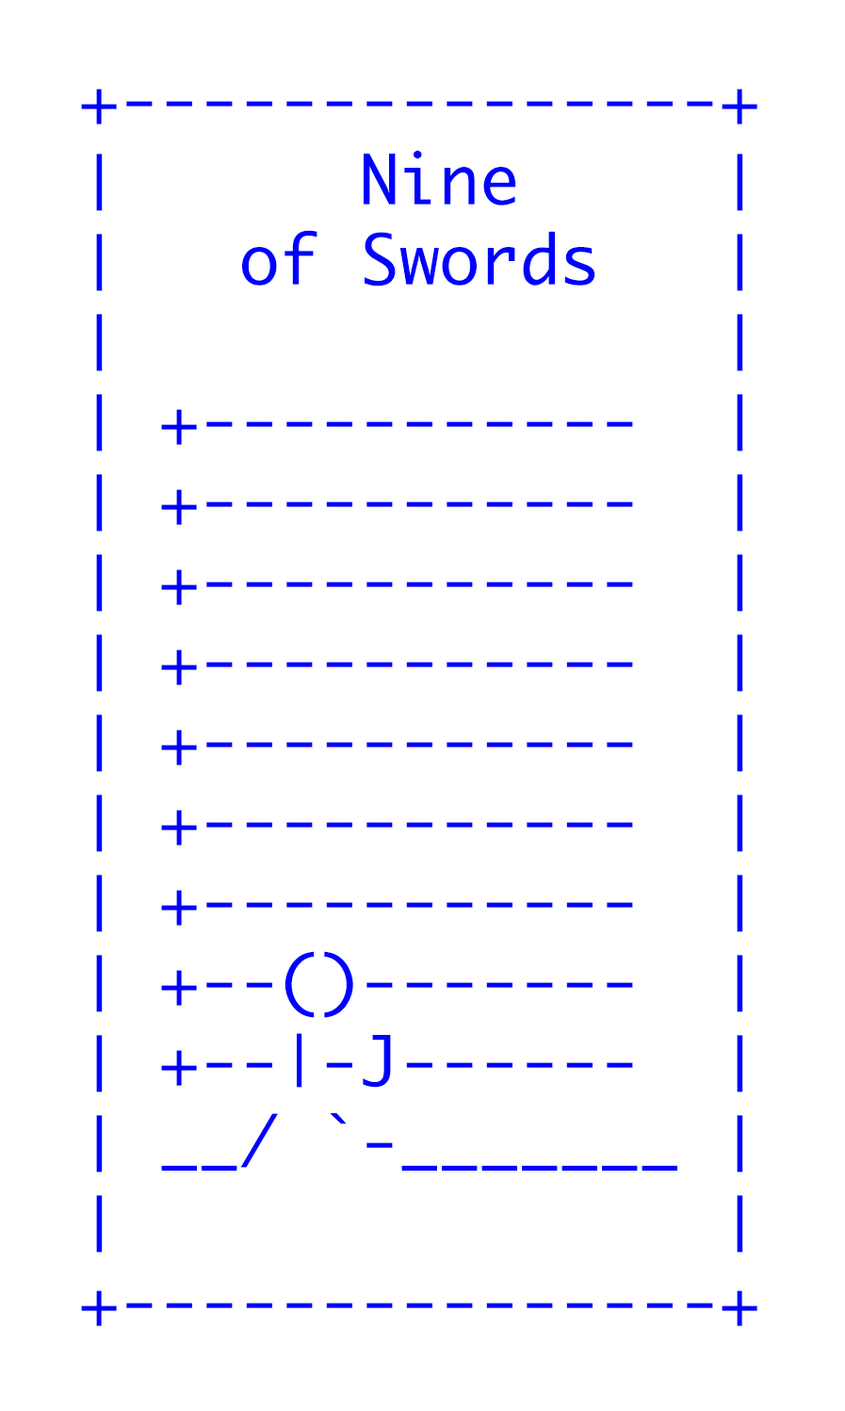
<style>
.page{position:relative;width:845px;height:1411px;background:#ffffff}
.page>*{position:absolute;margin:0}
.t1{font:66.7px "Monaco";color:#0000ff}
</style>
<div class="page">
<p class="t1" style="left:81px;top:89px;width:677px;height:1237px">+---------------+<br>│      Nine     │<br>│   of Swords   │<br>│               │<br>│ +-----------  │<br>│ +-----------  │<br>│ +-----------  │<br>│ +-----------  │<br>│ +-----------  │<br>│ +-----------  │<br>│ +-----------  │<br>│ +--()-------  │<br>│ +--|-J------  │<br>│ __/ `-_______ │<br>│               │<br>+---------------+</p>
</div>
